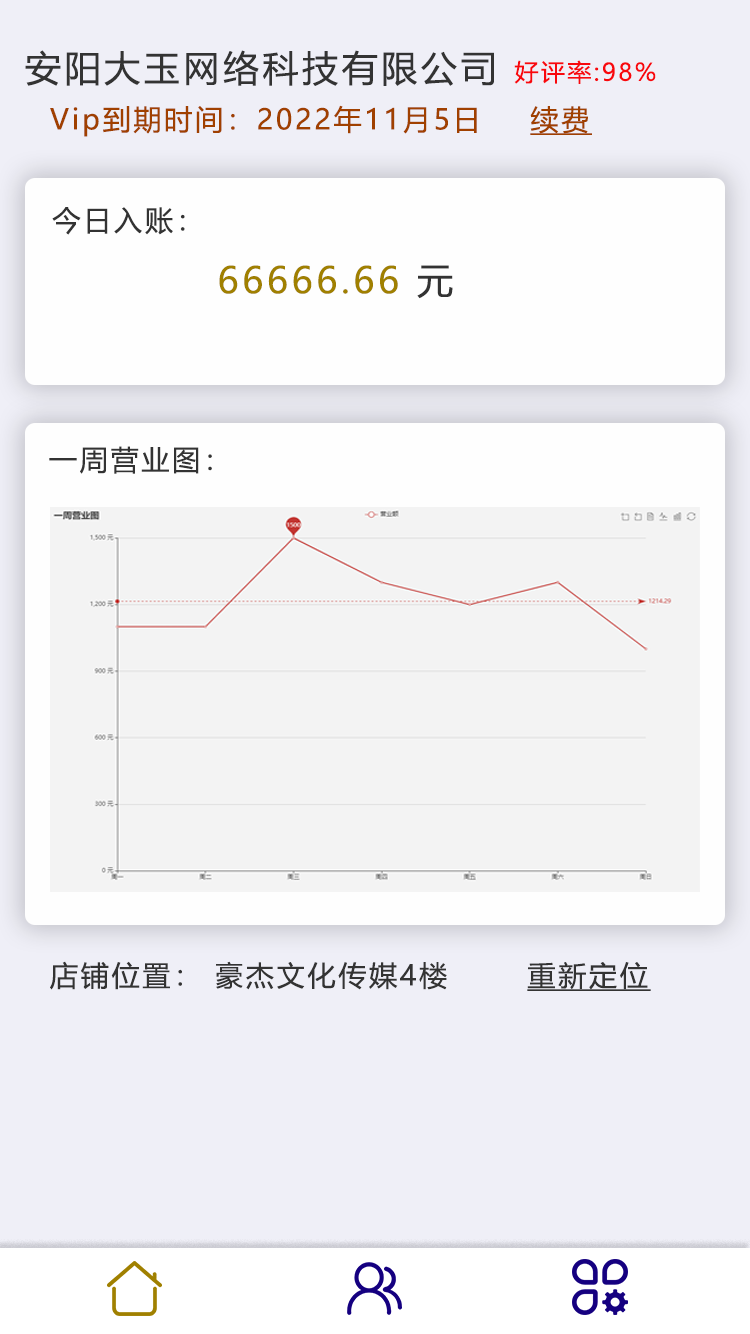
<style>
.page{position:relative;width:750px;height:1334px;background:#efeff7}
.page>*{position:absolute;margin:0}
.t1{font:36px "MicrosoftYaHei";letter-spacing:0.1em;color:#333333}
.t2{font:24px "MicrosoftYaHei";letter-spacing:0.1em;color:#f8080d}
.t3{font:28px "MicrosoftYaHei";letter-spacing:0.1em;color:#a04000}
.t4{font:28px "MicrosoftYaHei";letter-spacing:0.1em;color:#a04000;text-decoration:underline}
.t5{font:28px "MicrosoftYaHei";letter-spacing:0.1em;color:#333333}
.t6{font:36px "MicrosoftYaHei";letter-spacing:0.1em;color:#a08000}
.t7{font:28px "MicrosoftYaHei";letter-spacing:0.1em;color:#333333;text-decoration:underline}
</style>
<div class="page">
<p class="t1" style="left:25px;top:50px;width:469px;height:36px">安阳大玉网络科技有限公司</p>
<p class="t2" style="left:514px;top:60px;width:142px;height:24px">好评率:98%</p>
<p class="t3" style="left:50px;top:105px;width:427px;height:32px">Vip到期时间：2022年11月5日</p>
<p class="t4" style="left:530px;top:106px;width:62px;height:29px">续费</p>
<p class="t5" style="left:52px;top:207px;width:133px;height:28px">今日入账：</p>
<p class="t6" style="left:219px;top:265px;width:234px;height:34px">66666.66<span class="t1"> 元</span></p>
<p class="t5" style="left:49px;top:446px;width:163px;height:28px">一周营业图：</p>
<p class="t5" style="left:50px;top:961px;width:397px;height:29px">店铺位置： 豪杰文化传媒4楼</p>
<p class="t7" style="left:527px;top:962px;width:124px;height:29px">重新定位</p>
</div>
